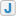
<style>
.page{position:relative;width:16px;height:16px}
.page>*{position:absolute;margin:0}
.t1{font:14px "Helvetica-Bold";color:#2e8bc4}
</style>
<div class="page">
<p class="t1" style="left:4px;top:3px;width:8px;height:10px">J</p>
</div>
